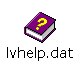
<style>
.page{position:relative;width:80px;height:80px;background:#ffffff}
.page>*{position:absolute;margin:0}
.t1{font:14px "MSReferenceSansSerif";color:#000000}
</style>
<div class="page">
<p class="t1" style="left:7px;top:47px;width:66px;height:14px">lvhelp.dat</p>
</div>
